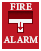
<style>
.page{position:relative;width:41px;height:51px;background:#be1623}
.page>*{position:absolute;margin:0}
.t1{font:10px "MinionVariableConcept-Roman";color:#f3f3f3}
</style>
<div class="page">
<p class="t1" style="left:10px;top:3px;width:22px;height:7px">FIRE</p>
<p class="t1" style="left:3px;top:36px;width:35px;height:7px">ALARM</p>
</div>
